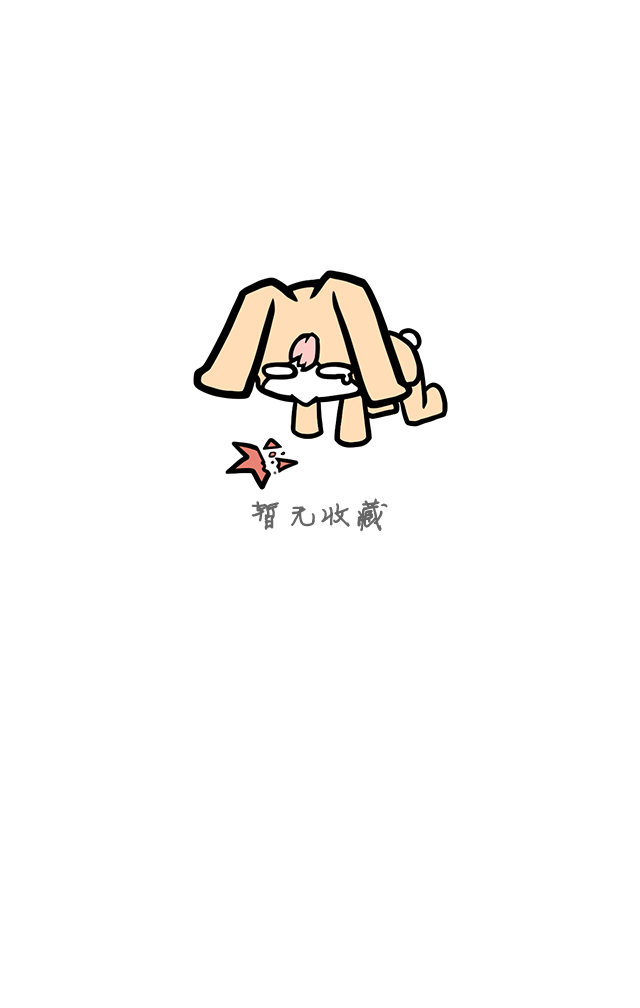
<style>
.page{position:relative;width:640px;height:1008px;background:#ffffff}
.page>*{position:absolute;margin:0}
.t1{font:34px "FZJLJW--GB1-0";color:#666666;font-weight:bold}
</style>
<div class="page">
<p class="t1" style="left:251px;top:498px;width:137px;height:34px">暂无收藏</p>
</div>
